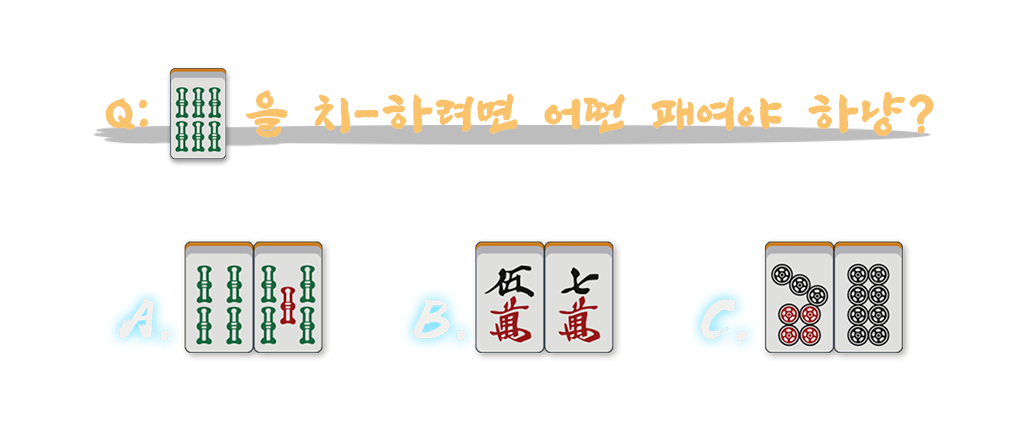
<style>
.page{position:relative;width:1024px;height:435px;background:#ffffff}
.page>*{position:absolute;margin:0}
.t1{font:48px "SangSangRockOTF";letter-spacing:0.06em;color:#fac26a;font-weight:bold}
</style>
<div class="page">
<p class="t1" style="left:105px;top:90px;width:829px;height:48px">Q:    을 치-하려면 어떤 패여야 하냥?</p>
</div>
